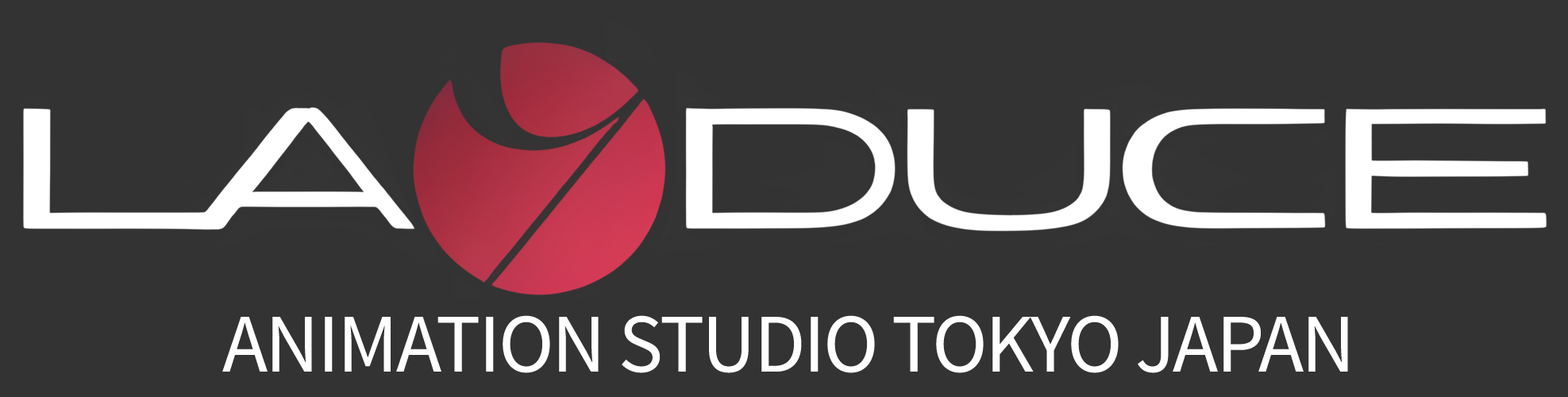
<style>
.page{position:relative;width:1568px;height:397px;background:#333333}
.page>*{position:absolute;margin:0}
.t1{font:83.4px "EquilibriumPro";letter-spacing:-0.024em;color:#ffffff}
</style>
<div class="page">
<p class="t1" style="left:222px;top:315px;width:1126px;height:58px">ANIMATION STUDIO TOKYO JAPAN</p>
</div>
